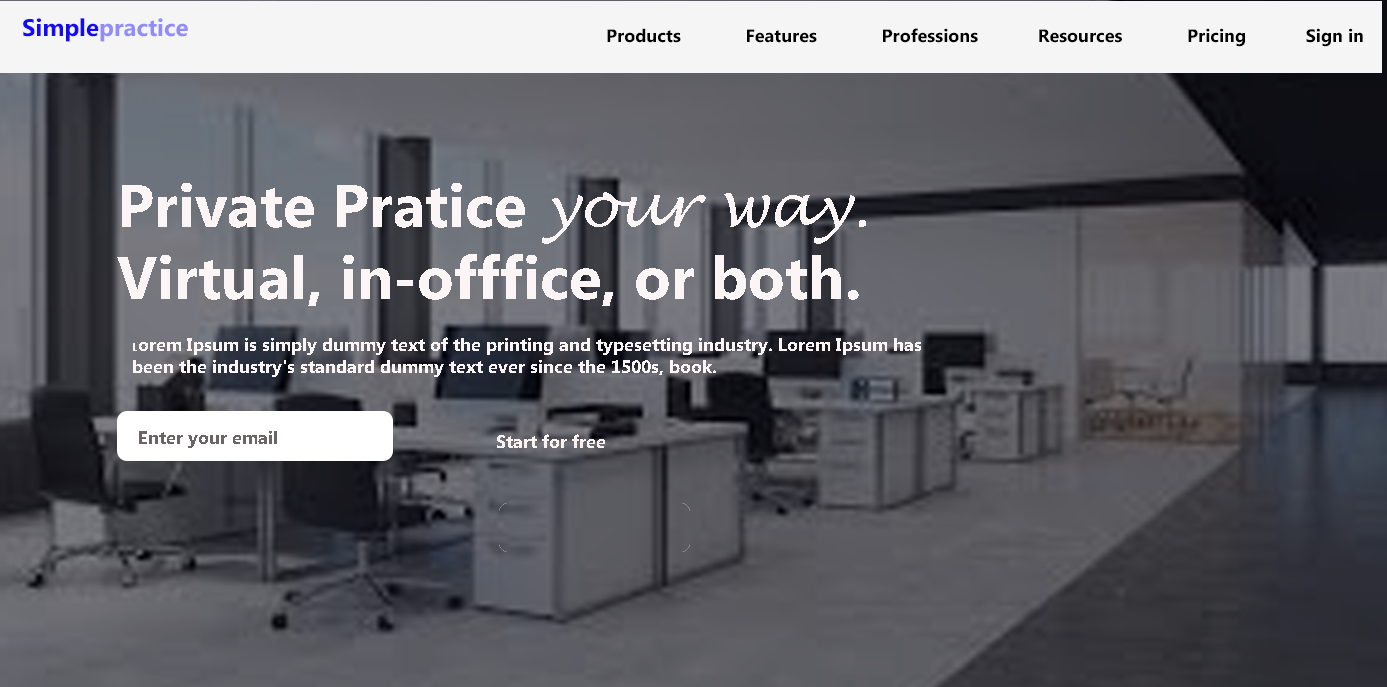
<style>
.page{position:relative;width:1387px;height:687px}
.page>*{position:absolute;margin:0}
.t1{font:24px "MicrosoftPhagsPa-Bold";color:#918cf7}
.t2{font:24px "MicrosoftPhagsPa-Bold";color:#130af9}
.t3{font:18px "MicrosoftPhagsPa-Bold";color:#000000}
.t4{font:60px "MicrosoftPhagsPa-Bold";color:#fbf5f5}
.t5{font:60px "LucidaHandwriting-Italic";color:#fbf5f5}
.t6{font:18px "MicrosoftPhagsPa-Bold";color:#fbf5f5}
.t7{font:11px "MicrosoftPhagsPa-Bold";color:#fbf5f5}
.t8{font:18px "MicrosoftPhagsPa-Bold";color:#6a6665}
.t9{font:18px "MicrosoftPhagsPa-Bold";color:#f9f2f0}
</style>
<div class="page">
<p class="t1" style="left:23px;top:18px;width:165px;height:24px"><span class="t2">Simple</span>practice</p>
<p class="t3" style="left:607px;top:28px;width:756px;height:19px">Products             Features             Professions            Resources             Pricing            Sign in</p>
<p class="t4" style="left:117px;top:183px;width:749px;height:123px">Private Pratice <span class="t5">your way. </span>Virtual, in-offfice, or both.</p>
<p class="t6" style="left:133px;top:337px;width:788px;height:40px"><span class="t7">L</span>orem Ipsum is simply dummy text of the printing and typesetting industry. Lorem Ipsum has been the industry's standard dummy text ever since the 1500s, book.</p>
<p class="t8" style="left:139px;top:431px;width:138px;height:17px">Enter your email</p>
<p class="t9" style="left:497px;top:434px;width:108px;height:14px">Start for free</p>
</div>
